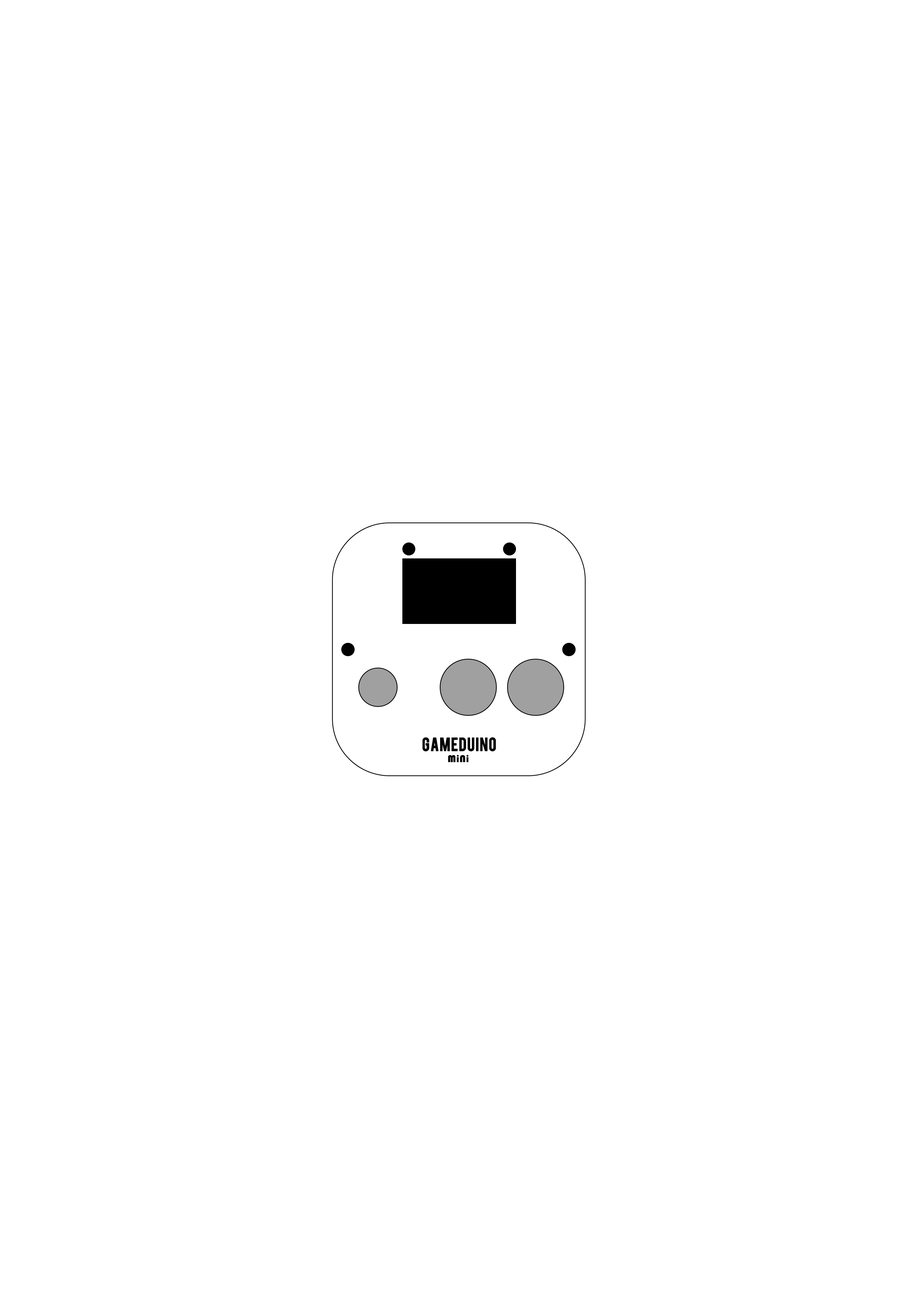
<style>
.page{position:relative;width:918px;height:1299px;background:#ffffff}
.page>*{position:absolute;margin:0}
.t1{font:14.9px "Bebas";letter-spacing:0.025em;color:#000000;font-weight:bold}
.t2{font:10.3px "Bauhaus93";letter-spacing:0.025em;color:#000000}
</style>
<div class="page">
<p class="t1" style="left:422px;top:737px;width:74px;height:15px">gameduino</p>
<p class="t2" style="left:448px;top:755px;width:21px;height:7px">MiNi</p>
</div>
